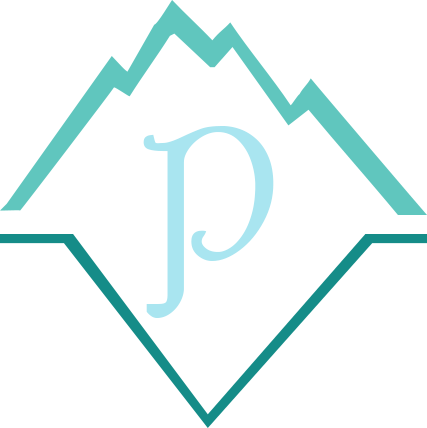
<style>
.page{position:relative;width:427px;height:428px;background:#ffffff}
.page>*{position:absolute;margin:0}
.t1{font:234px "Harrington";color:#a9e5f0}
</style>
<div class="page">
<p class="t1" style="left:143px;top:126px;width:131px;height:192px">P</p>
</div>
